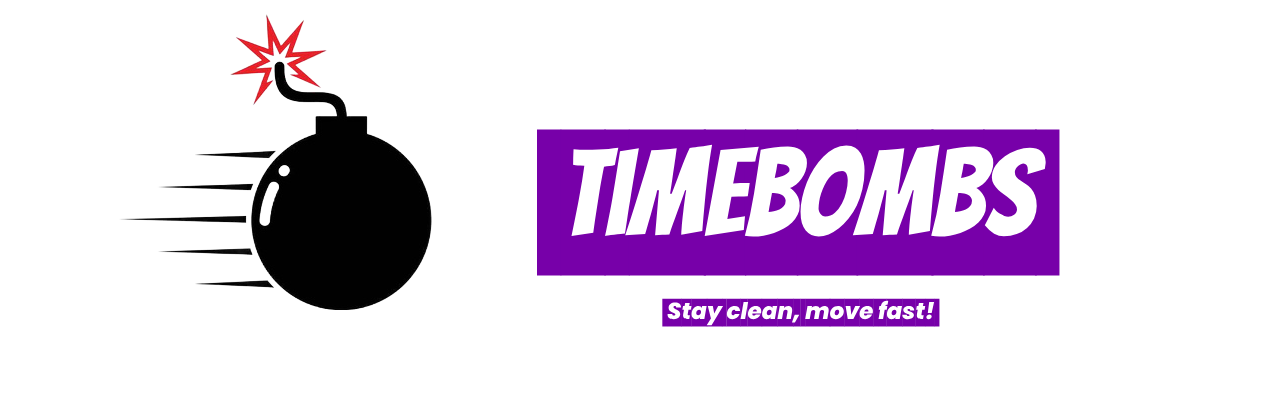
<style>
.page{position:relative;width:1280px;height:400px;background:#ffffff}
.page>*{position:absolute;margin:0}
.t1{font:23px "Poppins-ExtraBoldItalic"}
.t2{font:121px "Bangers-Regular"}
</style>
<div class="page">
<p class="t1" style="left:537px;top:129px;width:523px;height:198px"><span class="t2"> timebombs <br><br><br> </span>Stay clean, move fast!</p>
</div>
